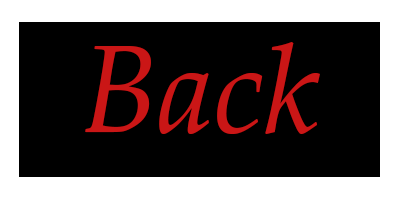
<style>
.page{position:relative;width:400px;height:200px;background:#000000}
.page>*{position:absolute;margin:0}
.t1{font:125px "PalatinoLinotype-Italic";color:#ca1616}
</style>
<div class="page">
<p class="t1" style="left:85px;top:42px;width:235px;height:92px">Back</p>
</div>
